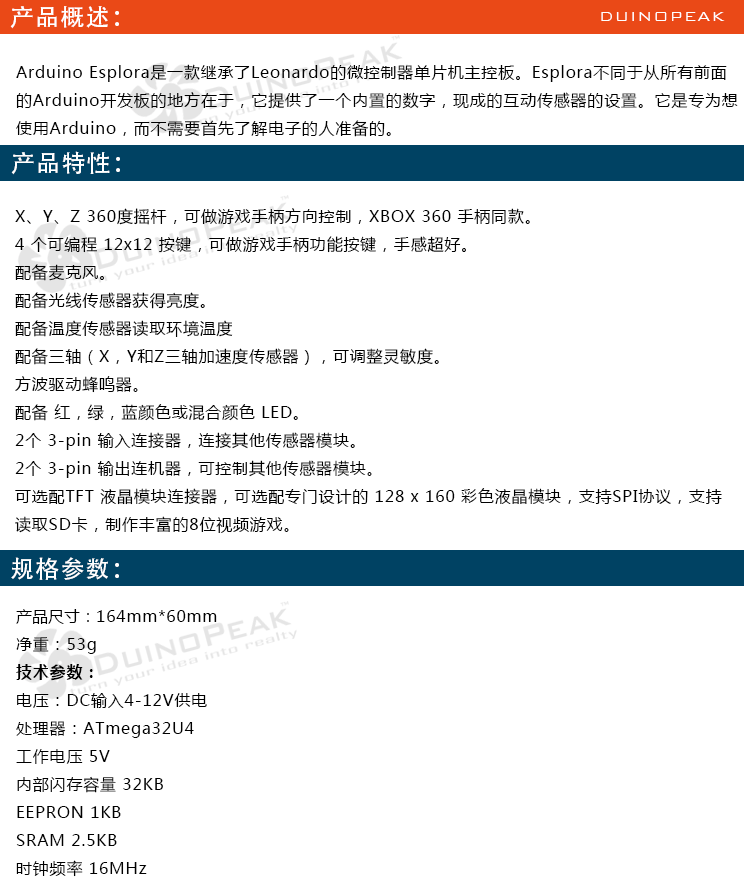
<style>
.page{position:relative;width:744px;height:887px;background:#ffffff}
.page>*{position:absolute;margin:0}
.t1{font:24px "AdobeHeitiStd-Regular";letter-spacing:0.05em;color:#ffffff}
.t2{font:18px "BankGothicBT-Light";letter-spacing:0.05em;color:#ffffff}
.t3{font:16px "MicrosoftYaHei";letter-spacing:0.05em;color:#000000}
.t4{font:16px "MicrosoftYaHei";color:#000000}
.t5{font:16px "MicrosoftYaHei-Bold";letter-spacing:0.05em;color:#000000}
</style>
<div class="page">
<p class="t1" style="left:10px;top:6px;width:109px;height:23px">产品概述：</p>
<p class="t2" style="left:601px;top:12px;width:124px;height:9px">DUINOPEAK</p>
<p class="t3" style="left:16px;top:64px;width:722px;height:73px">Arduino Esplora是一款继承了Leonardo的微控制器单片机主控板。Esplora不同于从所有前面<br>的Arduino开发板的地方在于，它提供了一个内置的数字，现成的互动传感器的设置。它是专为想<br>使用Arduino，而不需要首先了解电子的人准备的。</p>
<p class="t1" style="left:11px;top:151px;width:109px;height:24px">产品特性：</p>
<p class="t3" style="left:15px;top:208px;width:707px;height:325px">X、Y、Z 360度摇杆，可做游戏手柄方向控制，XBOX 360 手柄同款。<br>4 个可编程 12x12 按键，可做游戏手柄功能按键，手感超好。<br>配备麦克风。<br>配备光线传感器获得亮度。<br>配备温度传感器读取环境温度<br>配备三轴（X，Y和Z三轴加速度传感器），可调整灵敏度。<br>方波驱动蜂鸣器。<br>配备 红，绿，蓝颜色或混合颜色 LED。<br>2个 3-pin 输入连接器，连接其他传感器模块。<br>2个 3-pin 输出连机器，可控制其他传感器模块。<br>可选配TFT 液晶模块连接器，可选配专门设计的 128 x 160 彩色液晶模块，支持SPI协议，支持<br>读取SD卡，制作丰富的8位视频游戏。</p>
<p class="t1" style="left:11px;top:557px;width:108px;height:23px">规格参数：</p>
<p class="t3" style="left:16px;top:609px;width:201px;height:268px"><span class="t4">产品尺寸：</span>164mm*60mm<br>净重：53g<br><span class="t5">技术参数：<br></span>电压：DC输入4-12V供电<br>处理器：ATmega32U4<br>工作电压 5V<br>内部闪存容量 32KB<br>EEPRON 1KB<br>SRAM 2.5KB<br>时钟频率 16MHz</p>
</div>
